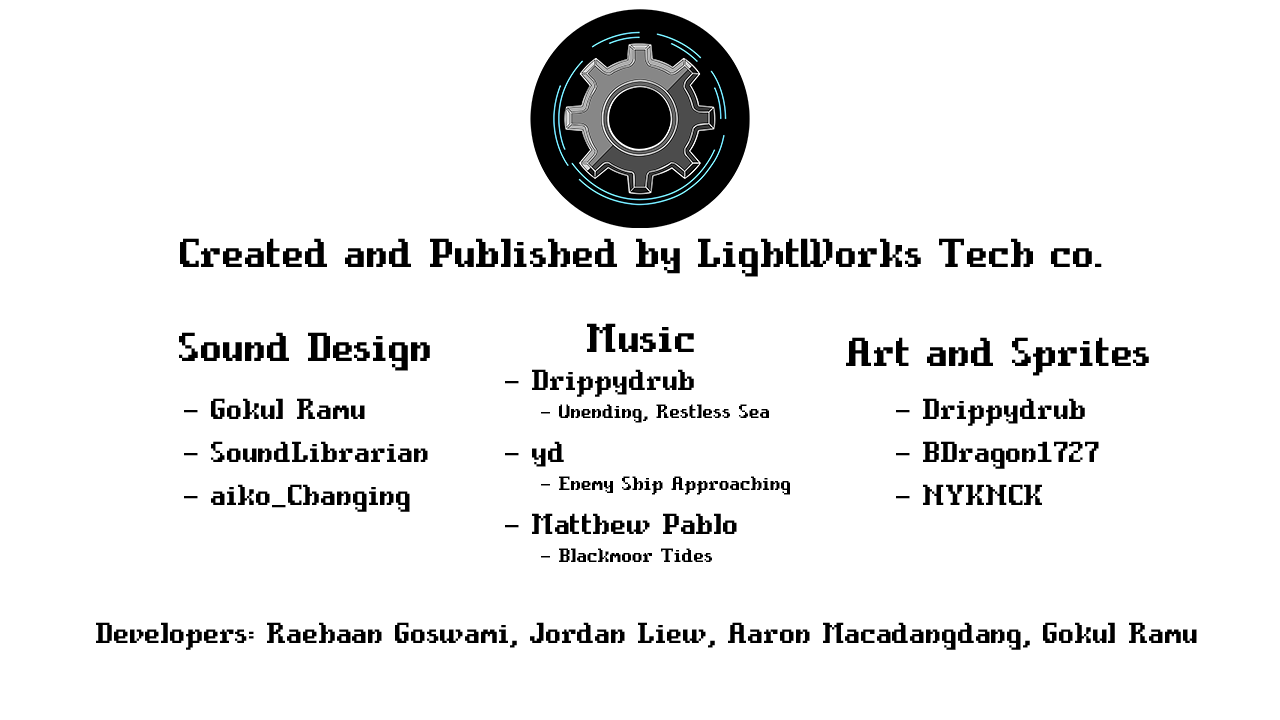
<style>
.page{position:relative;width:1280px;height:720px;background:#ffffff}
.page>*{position:absolute;margin:0}
.t1{font:50px "CompassPro";color:#000000}
.t2{font:24px "CompassPro";color:#000000}
.t3{font:36px "CompassPro";color:#000000}
</style>
<div class="page">
<p class="t1" style="left:180px;top:238px;width:922px;height:39px">Created and Published by LightWorks Tech co.</p>
<p class="t1" style="left:587px;top:323px;width:107px;height:29px">Music</p>
<p class="t1" style="left:179px;top:332px;width:251px;height:39px">Sound Design</p>
<p class="t1" style="left:846px;top:337px;width:303px;height:39px">Art and Sprites</p>
<p class="t2" style="left:505px;top:369px;width:285px;height:193px"><span class="t3">- Drippydrub<br> </span>- Unending, Restless Sea<br><span class="t3">- yd<br> </span>- Enemy Ship Approaching<br><span class="t3">- Matthew Pablo<br> </span>- Blackmoor Tides</p>
<p class="t3" style="left:184px;top:398px;width:244px;height:114px">- Gokul Ramu<br>- SoundLibrarian<br>- aiko_Changing</p>
<p class="t3" style="left:896px;top:398px;width:203px;height:107px">- Drippydrub<br>- BDragon1727<br>- NYKNCK</p>
<p class="t3" style="left:96px;top:622px;width:1101px;height:28px">Developers: Raehaan Goswami, Jordan Liew, Aaron Macadangdang, Gokul Ramu</p>
</div>
